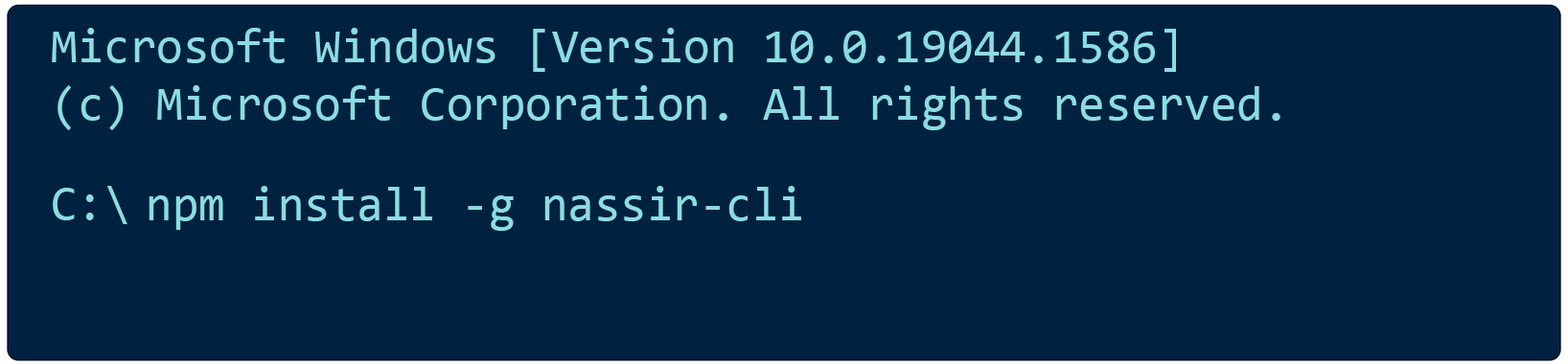
<style>
.page{position:relative;width:1568px;height:364px;background:#002240}
.page>*{position:absolute;margin:0}
.t1{font:47.9px "Consolas";color:#8bdde2}
</style>
<div class="page">
<p class="t1" style="left:52px;top:28px;width:1228px;height:102px">Microsoft Windows [Version 10.0.19044.1586]<br>(c) Microsoft Corporation. All rights reserved.</p>
<p class="t1" style="left:53px;top:186px;width:74px;height:38px">C:\</p>
<p class="t1" style="left:149px;top:186px;width:652px;height:45px">npm install -g nassir-cli</p>
</div>
